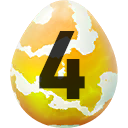
<style>
.page{position:relative;width:128px;height:128px;background:#ffffff}
.page>*{position:absolute;margin:0}
.t1{font:96px "Bahnschrift-Bold";color:#302601}
</style>
<div class="page">
<p class="t1" style="left:39px;top:31px;width:46px;height:68px">4</p>
</div>
